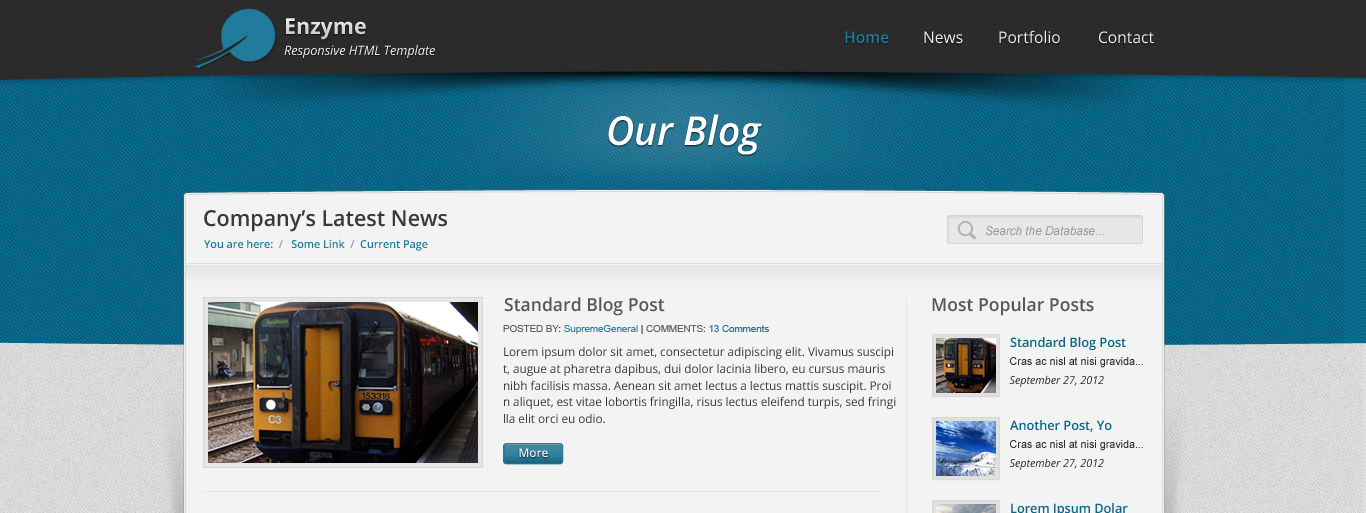
<style>
.page{position:relative;width:1366px;height:513px;background:#f4f3f3}
.page>*{position:absolute;margin:0}
.t1{font:22px "OpenSans-Bold";color:#d9d9d9}
.t2{font:16px "OpenSans";color:#efefef}
.t3{font:16px "OpenSans-Semibold";color:#217b9d}
.t4{font:13px "OpenSans-Italic";color:#efefef}
.t5{font:40px "OpenSans-SemiboldItalic";color:#ffffff}
.t6{font:22px "OpenSans-Semibold";color:#393939}
.t7{font:12px "Arial-ItalicMT";color:#979797}
.t8{font:11px "OpenSans-Semibold";color:#217b9d}
.t9{font:11px "OpenSans-Semibold";color:#949494}
.t10{font:18px "OpenSans-Semibold";color:#575757}
.t11{font:10px "ArialMT";color:#3183a1}
.t12{font:10px "ArialMT";color:#636262}
.t13{font:10px "ArialMT";color:#393939}
.t14{font:10px "ArialMT";color:#636363}
.t15{font:10px "ArialMT";color:#237492}
.t16{font:13px "OpenSans-Semibold";color:#0b6688}
.t17{font:12px "OpenSans";color:#393939}
.t18{font:11px "ArialMT";color:#2c2c2c}
.t19{font:11px "OpenSans-Italic";color:#2c2c2c}
.t20{font:12px "OpenSans-Semibold";color:#f2f2f2}
</style>
<div class="page">
<p class="t1" style="left:286px;top:18px;width:80px;height:22px">Enzyme</p>
<p class="t2" style="left:999px;top:30px;width:61px;height:14px">Portfolio</p>
<p class="t3" style="left:845px;top:31px;width:44px;height:13px">Home</p>
<p class="t2" style="left:924px;top:31px;width:39px;height:13px">News</p>
<p class="t2" style="left:1099px;top:31px;width:55px;height:13px">Contact</p>
<p class="t4" style="left:284px;top:45px;width:151px;height:13px">Responsive HTML Template</p>
<p class="t5" style="left:608px;top:114px;width:154px;height:41px">Our Blog</p>
<p class="t6" style="left:204px;top:210px;width:243px;height:22px">Company’s Latest News</p>
<p class="t7" style="left:986px;top:226px;width:118px;height:10px">Search the Database...</p>
<p class="t8" style="left:204px;top:239px;width:224px;height:12px">You are here:  <span class="t9">/   </span>Some Link  <span class="t9">/  </span>Current Page</p>
<p class="t10" style="left:504px;top:297px;width:161px;height:19px">Standard Blog Post</p>
<p class="t10" style="left:932px;top:297px;width:162px;height:19px">Most Popular Posts</p>
<p class="t11" style="left:503px;top:325px;width:266px;height:9px"><span class="t12">POSTED BY</span><span class="t13">: </span>SupremeGeneral <span class="t13">| </span><span class="t14">COMMENTS</span><span class="t13">: </span><span class="t15">13 Comments</span></p>
<p class="t16" style="left:1010px;top:337px;width:116px;height:13px">Standard Blog Post</p>
<p class="t17" style="left:503px;top:347px;width:393px;height:77px">Lorem ipsum dolor sit amet, consectetur adipiscing elit. Vivamus suscipi<br><br>t, augue at pharetra dapibus, dui dolor lacinia libero, eu cursus mauris <br><br>nibh facilisis massa. Aenean sit amet lectus a lectus mattis suscipit. Proi<br><br>n aliquet, est vitae lobortis fringilla, risus lectus eleifend turpis, sed fringi<br><br>lla elit orci eu odio.</p>
<p class="t18" style="left:1010px;top:357px;width:133px;height:11px">Cras ac nisl at nisi gravida...</p>
<p class="t19" style="left:1009px;top:375px;width:95px;height:12px">September 27, 2012</p>
<p class="t16" style="left:1010px;top:420px;width:102px;height:12px">Another Post, Yo</p>
<p class="t20" style="left:519px;top:448px;width:29px;height:9px">More</p>
<p class="t18" style="left:1010px;top:440px;width:133px;height:11px">Cras ac nisl at nisi gravida...</p>
<p class="t19" style="left:1009px;top:458px;width:95px;height:12px">September 27, 2012</p>
<p class="t16" style="left:1011px;top:503px;width:117px;height:10px">Lorem Ipsum Dolar</p>
</div>
